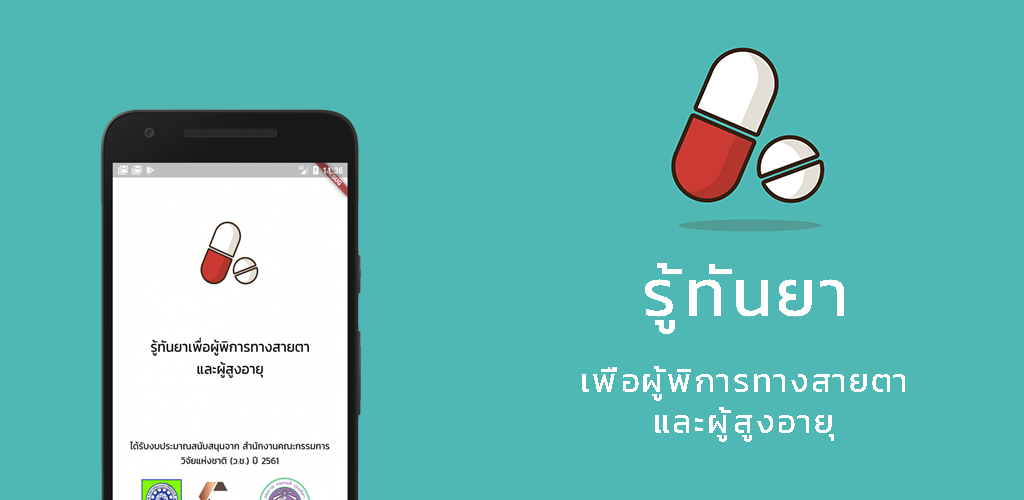
<style>
.page{position:relative;width:1024px;height:500px;background:#4fb8b4}
.page>*{position:absolute;margin:0}
.t1{font:66.7px "Kanit-Regular";letter-spacing:0.05em;color:#ffffff;text-transform:uppercase}
.t2{font:33.3px/41.7px "Kanit-Regular";letter-spacing:0.05em;color:#ffffff;text-transform:uppercase}
</style>
<div class="page">
<p class="t1" style="left:645px;top:263px;width:199px;height:71px">รู้ทันยา</p>
<p class="t2" style="left:582px;top:366px;width:323px;height:76px;text-align:center">เพื่อผู้พิการทางสายตา<br>และผู้สูงอายุ</p>
</div>
